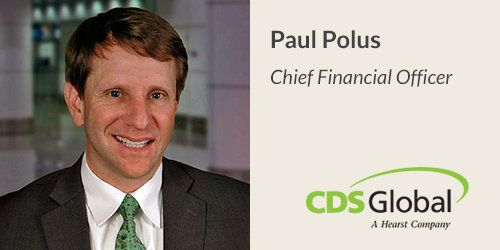
<style>
.page{position:relative;width:500px;height:250px;background:#f0ebe1}
.page>*{position:absolute;margin:0}
.t1{font:20px/18px "Lato-Italic";color:#414042}
.t2{font:24px/18px "Lato-Bold";color:#414042}
</style>
<div class="page">
<p class="t1" style="left:271px;top:30px;width:182px;height:57px"><span class="t2">Paul Polus<br><br></span>Chief Financial Officer</p>
</div>
